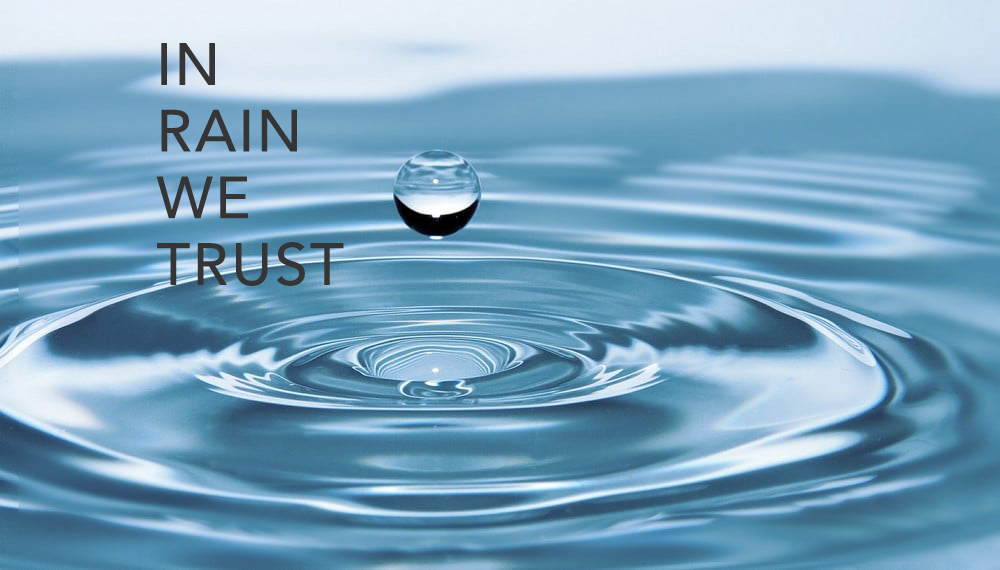
<style>
.page{position:relative;width:1000px;height:570px}
.page>*{position:absolute;margin:0}
.t1{font:58.3px/66.7px "Avenir-Roman";letter-spacing:0.02em;color:#353535;text-transform:uppercase;font-weight:bold}
</style>
<div class="page">
<p class="t1" style="left:156px;top:43px;width:188px;height:243px;text-align:right">In<br>Rain<br>We<br>Trust</p>
</div>
